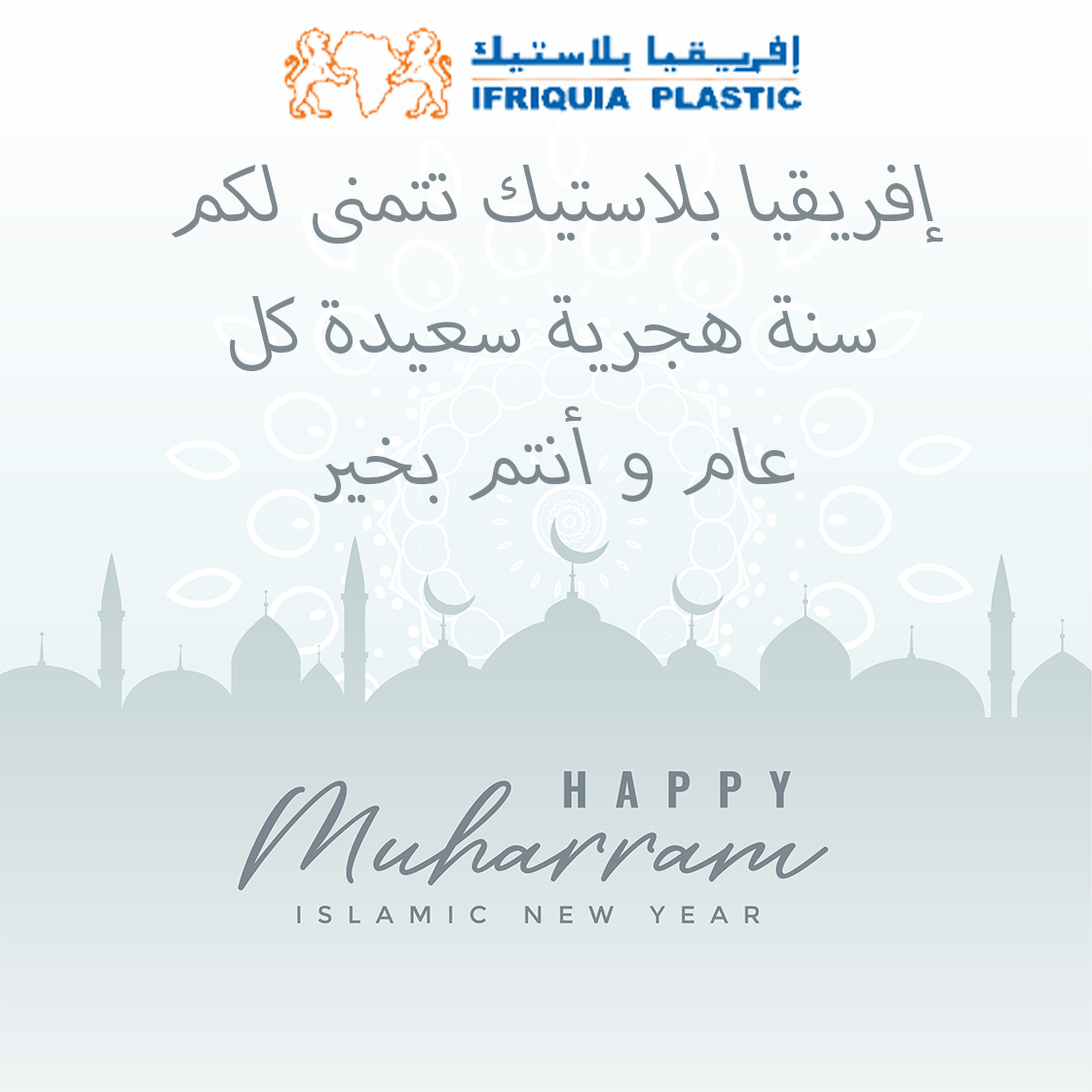
<style>
.page{position:relative;width:1092px;height:1092px}
.page>*{position:absolute;margin:0}
.t1{font:109.6px "MyriadArabic-It";color:#7e898f}
</style>
<div class="page">
<p class="t1" style="left:171px;top:164px;width:773px;height:340px;text-align:center">إفريقيا بلاستيك تتمنى لكم <br>سنة هجرية سعيدة كل <br>عام و أنتم بخير</p>
</div>
